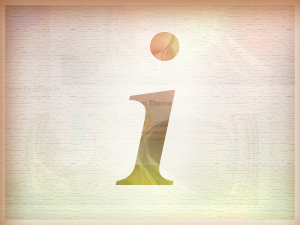
<style>
.page{position:relative;width:300px;height:225px}
.page>*{position:absolute;margin:0}
.t1{font:260px "Perpetua-BoldItalic";letter-spacing:-0.025em}
</style>
<div class="page">
<p class="t1" style="left:115px;top:32px;width:65px;height:153px">i</p>
</div>
